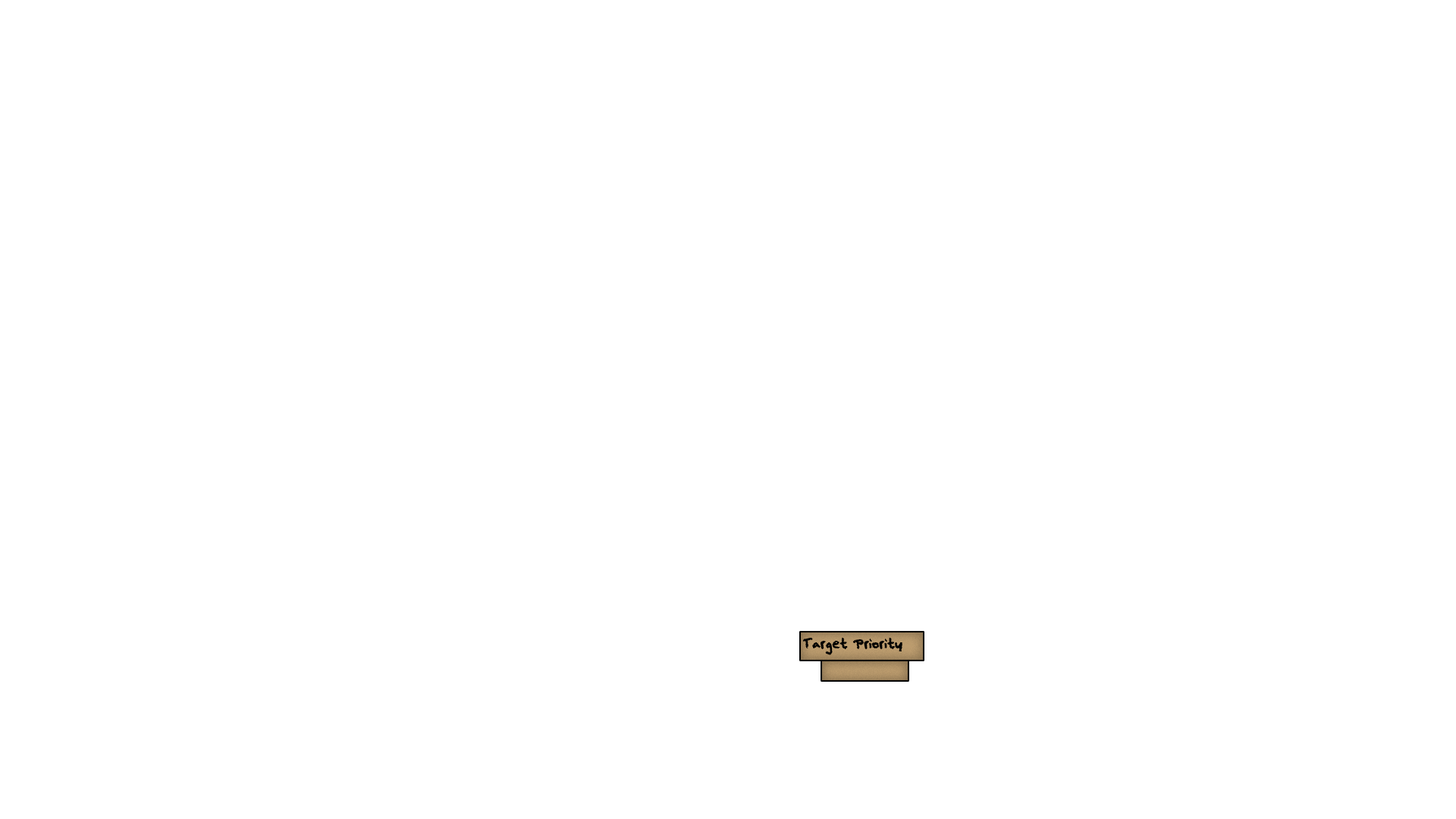
<style>
.page{position:relative;width:1456px;height:819px;background:#ffffff}
.page>*{position:absolute;margin:0}
.t1{font:11.4px "squeakychalksound";color:#000000}
</style>
<div class="page">
<p class="t1" style="left:803px;top:638px;width:99px;height:17px">Target Priority</p>
</div>
